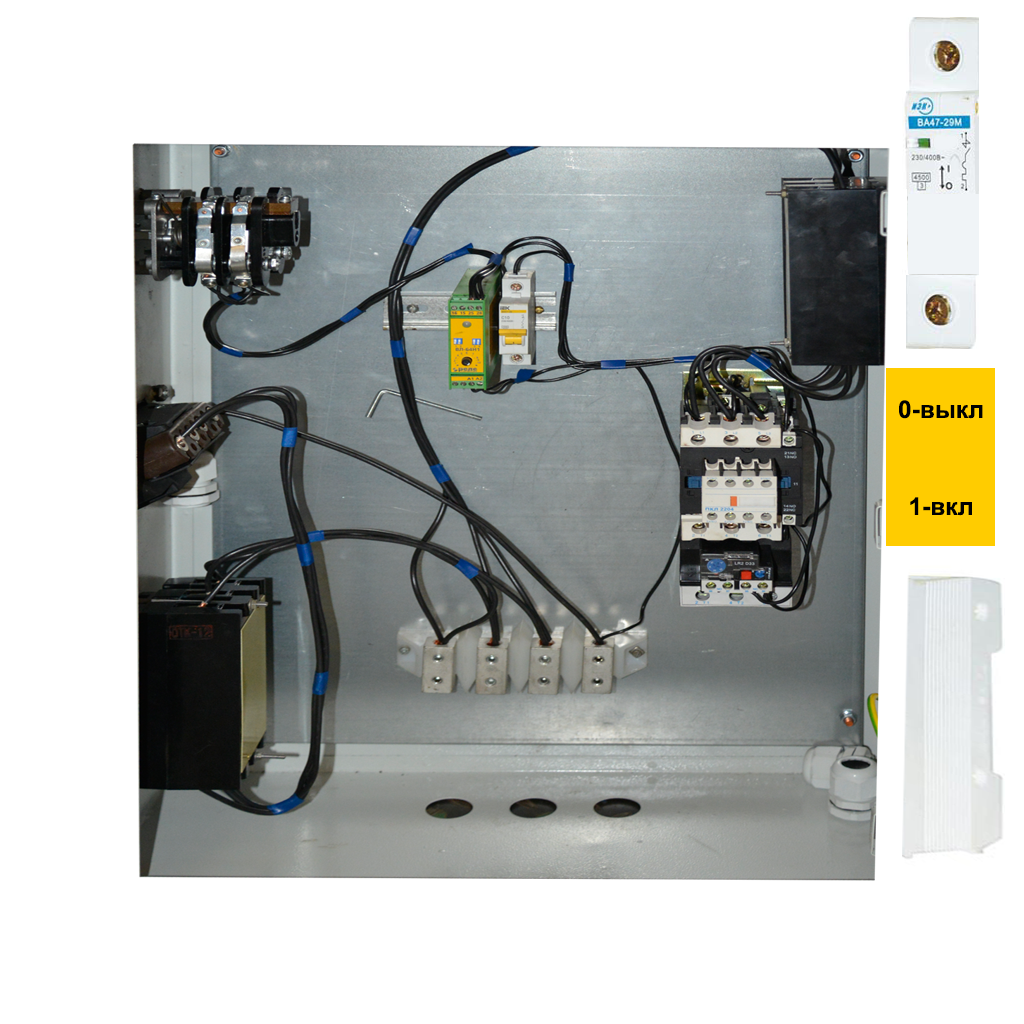
<style>
.page{position:relative;width:1024px;height:1024px;background:#ffffff}
.page>*{position:absolute;margin:0}
.t1{font:24.3px "Arial-BoldMT";color:#000000}
</style>
<div class="page">
<p class="t1" style="left:899px;top:400px;width:84px;height:19px">0-выкл</p>
<p class="t1" style="left:910px;top:497px;width:62px;height:19px">1-вкл</p>
</div>
